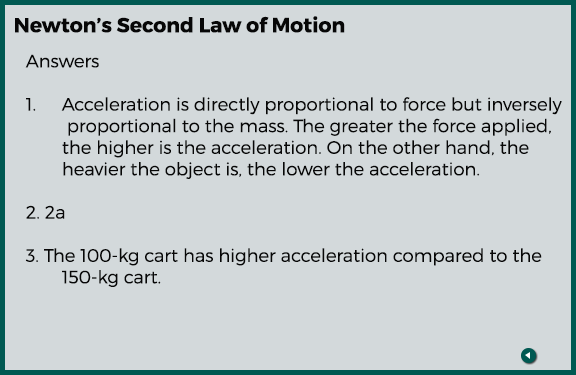
<style>
.page{position:relative;width:576px;height:375px;background:#d3d9db}
.page>*{position:absolute;margin:0}
.t1{font:20.4px "Montserrat-Bold";color:#070707}
.t2{font:18px "Montserrat-Light";color:#070707}
</style>
<div class="page">
<p class="t1" style="left:15px;top:16px;width:330px;height:17px">Newton’s Second Law of Motion</p>
<p class="t2" style="left:25px;top:54px;width:537px;height:233px">Answers<br><br>1.  Acceleration is directly proportional to force but inversely<br>  proportional to the mass. The greater the force applied,<br> the higher is the acceleration. On the other hand, the<br> heavier the object is, the lower the acceleration.<br><br>2. 2a<br><br>3. The 100-kg cart has higher acceleration compared to the<br> 150-kg cart.</p>
</div>
